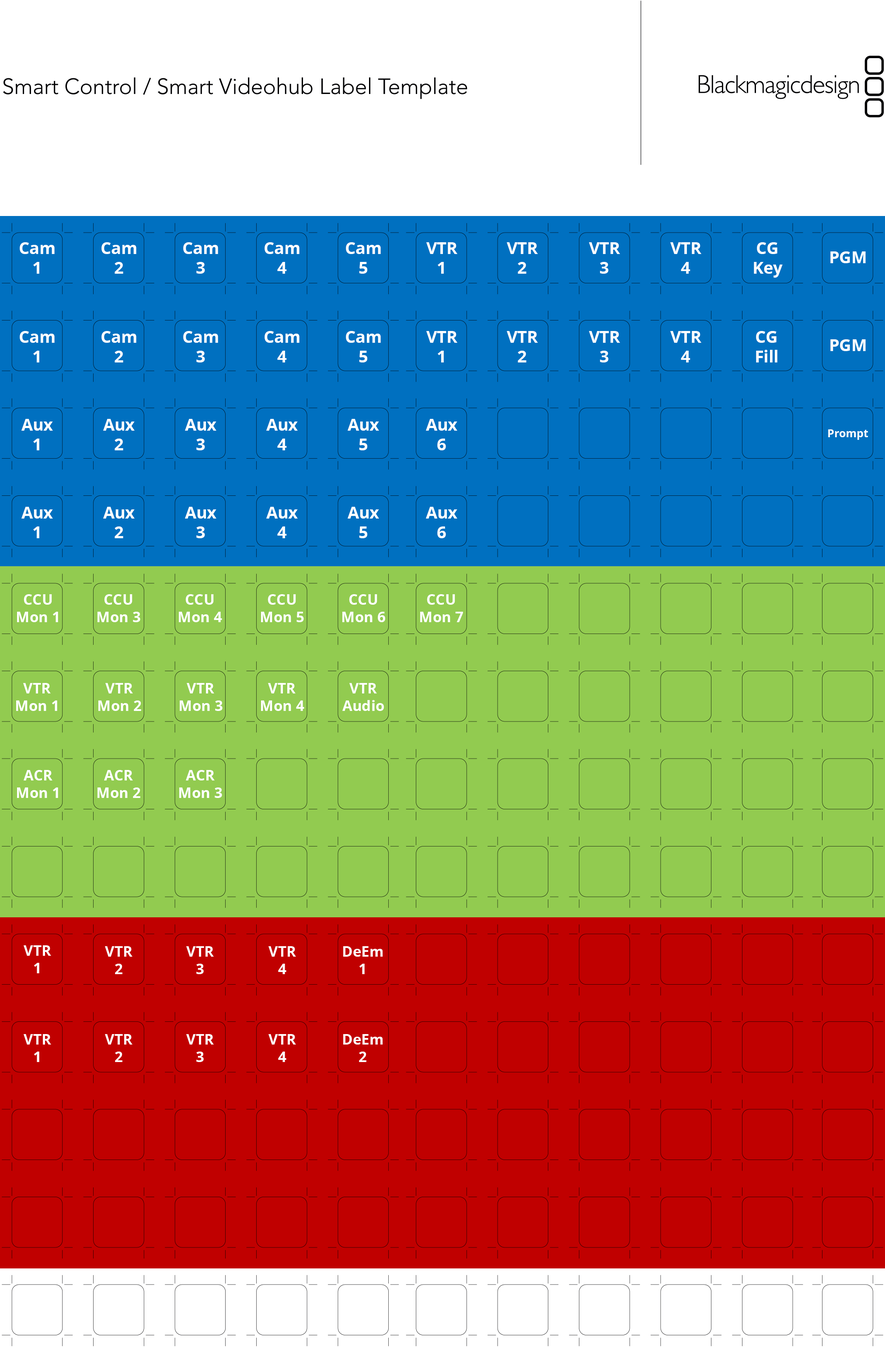
<style>
.page{position:relative;width:885px;height:1348px}
.page>*{position:absolute;margin:0}
.t1{font:16.4px "OpenSans-Bold";color:#ffffff}
.t2{font:10.9px "OpenSans-Bold";color:#ffffff}
.t3{font:14.6px "OpenSans-Bold";color:#ffffff}
</style>
<div class="page">
<p class="t1" style="left:20px;top:242px;width:35px;height:32px;text-align:center">Cam<br>1</p>
<p class="t1" style="left:101px;top:242px;width:35px;height:32px;text-align:center">Cam<br>2</p>
<p class="t1" style="left:183px;top:242px;width:35px;height:32px;text-align:center">Cam<br>3</p>
<p class="t1" style="left:264px;top:242px;width:35px;height:32px;text-align:center">Cam<br>4</p>
<p class="t1" style="left:346px;top:242px;width:35px;height:32px;text-align:center">Cam<br>5</p>
<p class="t1" style="left:426px;top:242px;width:31px;height:32px;text-align:center">VTR<br>1</p>
<p class="t1" style="left:507px;top:242px;width:31px;height:32px;text-align:center">VTR<br>2</p>
<p class="t1" style="left:589px;top:242px;width:31px;height:32px;text-align:center">VTR<br>3</p>
<p class="t1" style="left:670px;top:242px;width:31px;height:32px;text-align:center">VTR<br>4</p>
<p class="t1" style="left:754px;top:242px;width:28px;height:36px;text-align:center">CG<br>Key</p>
<p class="t1" style="left:830px;top:251px;width:36px;height:12px">PGM</p>
<p class="t1" style="left:20px;top:331px;width:35px;height:31px;text-align:center">Cam<br>1</p>
<p class="t1" style="left:101px;top:331px;width:35px;height:31px;text-align:center">Cam<br>2</p>
<p class="t1" style="left:183px;top:331px;width:35px;height:31px;text-align:center">Cam<br>3</p>
<p class="t1" style="left:264px;top:331px;width:35px;height:31px;text-align:center">Cam<br>4</p>
<p class="t1" style="left:346px;top:331px;width:35px;height:31px;text-align:center">Cam<br>5</p>
<p class="t1" style="left:426px;top:331px;width:31px;height:31px;text-align:center">VTR<br>1</p>
<p class="t1" style="left:507px;top:331px;width:31px;height:31px;text-align:center">VTR<br>2</p>
<p class="t1" style="left:589px;top:331px;width:31px;height:31px;text-align:center">VTR<br>3</p>
<p class="t1" style="left:670px;top:331px;width:31px;height:31px;text-align:center">VTR<br>4</p>
<p class="t1" style="left:756px;top:331px;width:21px;height:31px;text-align:center">CG<br>Fill</p>
<p class="t1" style="left:830px;top:339px;width:36px;height:12px">PGM</p>
<p class="t1" style="left:21px;top:419px;width:32px;height:31px;text-align:center">Aux<br>1</p>
<p class="t1" style="left:103px;top:419px;width:32px;height:31px;text-align:center">Aux<br>2</p>
<p class="t1" style="left:185px;top:419px;width:31px;height:31px;text-align:center">Aux<br>3</p>
<p class="t1" style="left:266px;top:419px;width:32px;height:31px;text-align:center">Aux<br>4</p>
<p class="t1" style="left:348px;top:419px;width:31px;height:31px;text-align:center">Aux<br>5</p>
<p class="t1" style="left:426px;top:419px;width:31px;height:31px;text-align:center">Aux<br>6</p>
<p class="t2" style="left:828px;top:429px;width:40px;height:11px">Prompt</p>
<p class="t1" style="left:21px;top:507px;width:32px;height:31px;text-align:center">Aux<br>1</p>
<p class="t1" style="left:103px;top:507px;width:32px;height:31px;text-align:center">Aux<br>2</p>
<p class="t1" style="left:185px;top:507px;width:31px;height:31px;text-align:center">Aux<br>3</p>
<p class="t1" style="left:266px;top:507px;width:32px;height:31px;text-align:center">Aux<br>4</p>
<p class="t1" style="left:348px;top:507px;width:31px;height:31px;text-align:center">Aux<br>5</p>
<p class="t1" style="left:426px;top:507px;width:31px;height:31px;text-align:center">Aux<br>6</p>
<p class="t3" style="left:17px;top:594px;width:41px;height:28px;text-align:center">CCU<br>Mon 1</p>
<p class="t3" style="left:97px;top:594px;width:43px;height:28px;text-align:center">CCU<br>Mon 3</p>
<p class="t3" style="left:179px;top:594px;width:43px;height:28px;text-align:center">CCU<br>Mon 4</p>
<p class="t3" style="left:261px;top:594px;width:43px;height:28px;text-align:center">CCU<br>Mon 5</p>
<p class="t3" style="left:342px;top:594px;width:43px;height:28px;text-align:center">CCU<br>Mon 6</p>
<p class="t3" style="left:420px;top:594px;width:43px;height:28px;text-align:center">CCU<br>Mon 7</p>
<p class="t3" style="left:16px;top:683px;width:41px;height:28px;text-align:center">VTR<br>Mon 1</p>
<p class="t3" style="left:98px;top:683px;width:43px;height:28px;text-align:center">VTR<br>Mon 2</p>
<p class="t3" style="left:180px;top:683px;width:43px;height:28px;text-align:center">VTR<br>Mon 3</p>
<p class="t3" style="left:261px;top:683px;width:43px;height:28px;text-align:center">VTR<br>Mon 4</p>
<p class="t3" style="left:342px;top:683px;width:42px;height:28px;text-align:center">VTR<br>Audio</p>
<p class="t3" style="left:17px;top:770px;width:41px;height:28px;text-align:center">ACR<br>Mon 1</p>
<p class="t3" style="left:97px;top:770px;width:43px;height:28px;text-align:center">ACR<br>Mon 2</p>
<p class="t3" style="left:179px;top:770px;width:43px;height:28px;text-align:center">ACR<br>Mon 3</p>
<p class="t3" style="left:24px;top:945px;width:27px;height:28px;text-align:center">VTR<br>1</p>
<p class="t3" style="left:105px;top:946px;width:27px;height:28px;text-align:center">VTR<br>2</p>
<p class="t3" style="left:186px;top:946px;width:28px;height:28px;text-align:center">VTR<br>3</p>
<p class="t3" style="left:268px;top:946px;width:28px;height:28px;text-align:center">VTR<br>4</p>
<p class="t3" style="left:343px;top:946px;width:40px;height:28px;text-align:center">DeEm<br>1</p>
<p class="t3" style="left:24px;top:1034px;width:27px;height:28px;text-align:center">VTR<br>1</p>
<p class="t3" style="left:105px;top:1034px;width:27px;height:28px;text-align:center">VTR<br>2</p>
<p class="t3" style="left:186px;top:1034px;width:28px;height:28px;text-align:center">VTR<br>3</p>
<p class="t3" style="left:268px;top:1034px;width:28px;height:28px;text-align:center">VTR<br>4</p>
<p class="t3" style="left:343px;top:1034px;width:40px;height:28px;text-align:center">DeEm<br>2</p>
</div>
